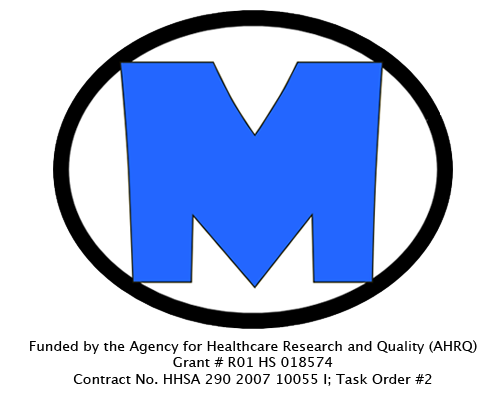
<style>
.page{position:relative;width:500px;height:400px;background:#ffffff}
.page>*{position:absolute;margin:0}
.t1{font:13.9px "LucidaGrande";color:#000000}
</style>
<div class="page">
<p class="t1" style="left:30px;top:340px;width:447px;height:46px;text-align:center">Funded by the Agency for Healthcare Research and Quality (AHRQ)<br>Grant # R01 HS 018574<br>Contract No. HHSA 290 2007 10055 I; Task Order #2</p>
</div>
